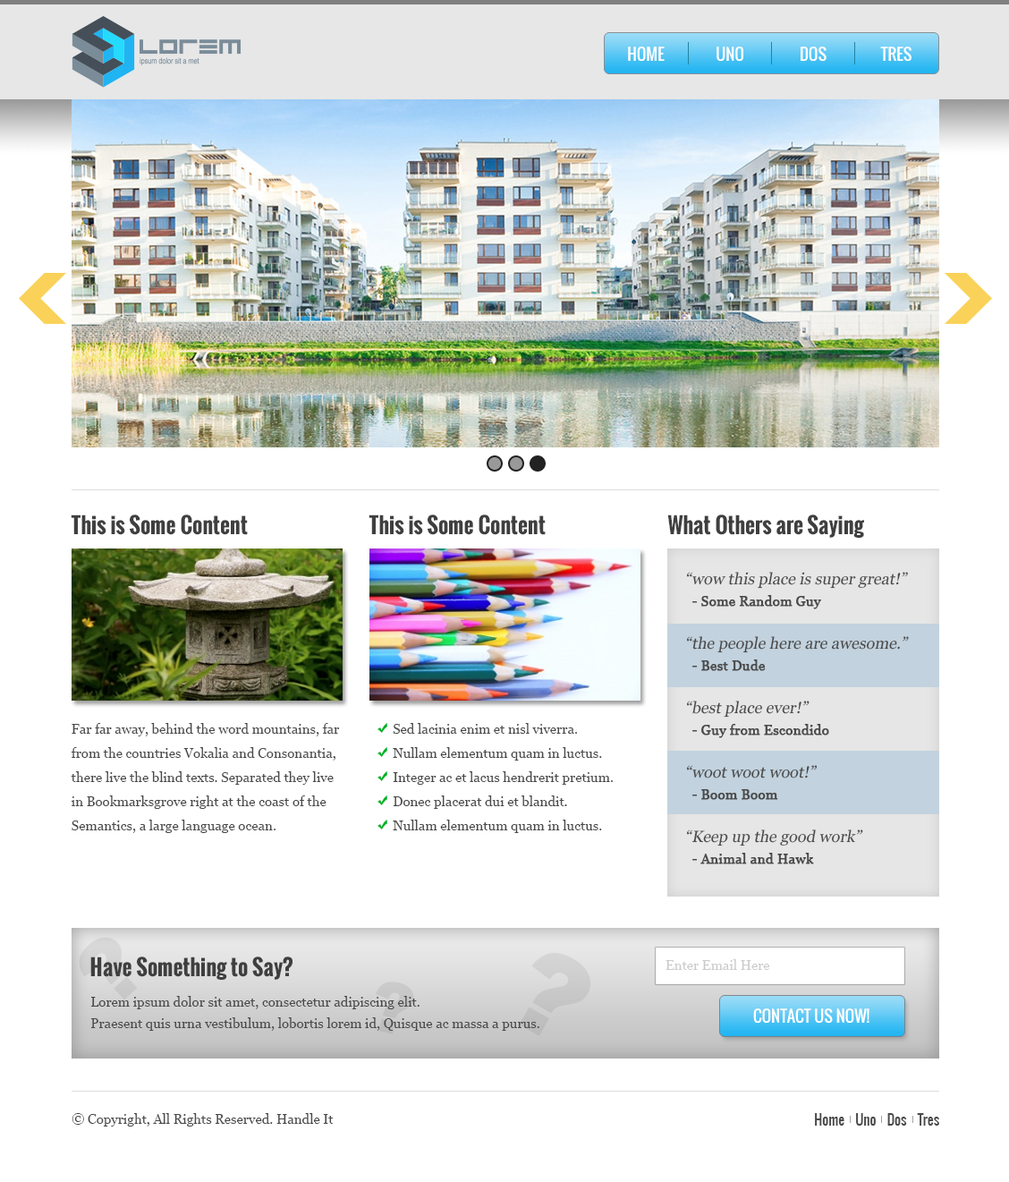
<style>
.page{position:relative;width:1009px;height:1182px;background:#ffffff}
.page>*{position:absolute;margin:0}
.t1{font:16.1px "Oswald-Regular";color:#ffffff}
.t2{font:21.5px "Oswald-Bold";color:#3f3f3f}
.t3{font:16.1px/21.5px "Georgia";color:#4a4a4a;font-style:italic}
.t4{font:13.4px/21.5px "Georgia";color:#4a4a4a;font-weight:bold}
.t5{font:13.4px/24.2px "Georgia";color:#4a4a4a}
.t6{font:115.2px "Arial-Black";color:#c9c9c9}
.t7{font:13.4px "Georgia";color:#cccccc}
.t8{font:13.4px/21.5px "Georgia";color:#4a4a4a}
.t9{font:13.4px "Georgia";color:#4a4a4a}
.t10{font:13.4px "Oswald-Regular";color:#4a4a4a}
</style>
<div class="page">
<p class="t1" style="left:628px;top:47px;width:37px;height:15px">HOME</p>
<p class="t1" style="left:717px;top:47px;width:26px;height:15px">UNO</p>
<p class="t1" style="left:801px;top:47px;width:26px;height:15px">DOS</p>
<p class="t1" style="left:880px;top:47px;width:32px;height:15px">TRES</p>
<p class="t2" style="left:71px;top:514px;width:177px;height:21px">This is Some Content</p>
<p class="t2" style="left:369px;top:514px;width:177px;height:21px">This is Some Content</p>
<p class="t2" style="left:667px;top:514px;width:197px;height:24px">What Others are Saying</p>
<p class="t3" style="left:687px;top:572px;width:222px;height:292px">“wow this place is super great!”<br><span class="t4">  - Some Random Guy<br><br></span>“the people here are awesome.”<br><span class="t4">  - Best Dude<br><br></span>“best place ever!”<br><span class="t4">  - Guy from Escondido<br><br></span>“woot woot woot!”<br><span class="t4">  - Boom Boom<br><br></span>“Keep up the good work”<br><span class="t4">  - Animal and Hawk</span></p>
<p class="t5" style="left:71px;top:723px;width:268px;height:110px">Far far away, behind the word mountains, far from the countries Vokalia and Consonantia, there live the blind texts. Separated they live in Bookmarksgrove right at the coast of the Semantics, a large language ocean.</p>
<p class="t5" style="left:393px;top:723px;width:220px;height:110px">Sed lacinia enim et nisl viverra.<br>       Nullam elementum quam in luctus.<br>       Integer ac et lacus hendrerit pretium.<br>       Donec placerat dui et blandit.<br>       Nullam elementum quam in luctus.</p>
<p class="t6" style="left:519px;top:952px;width:72px;height:84px;rotate:30deg">?</p>
<p class="t2" style="left:90px;top:956px;width:203px;height:24px">Have Something to Say?</p>
<p class="t7" style="left:666px;top:959px;width:104px;height:11px">Enter Email Here</p>
<p class="t8" style="left:90px;top:996px;width:449px;height:35px">Lorem ipsum dolor sit amet, consectetur adipiscing elit. <br>Praesent quis urna vestibulum, lobortis lorem id, Quisque ac massa a purus.</p>
<p class="t1" style="left:753px;top:1008px;width:117px;height:15px">CONTACT US NOW!</p>
<p class="t9" style="left:72px;top:1113px;width:262px;height:13px">© Copyright, All Rights Reserved. Handle It</p>
<p class="t10" style="left:815px;top:1113px;width:124px;height:12px">Home    Uno    Dos    Tres</p>
</div>
